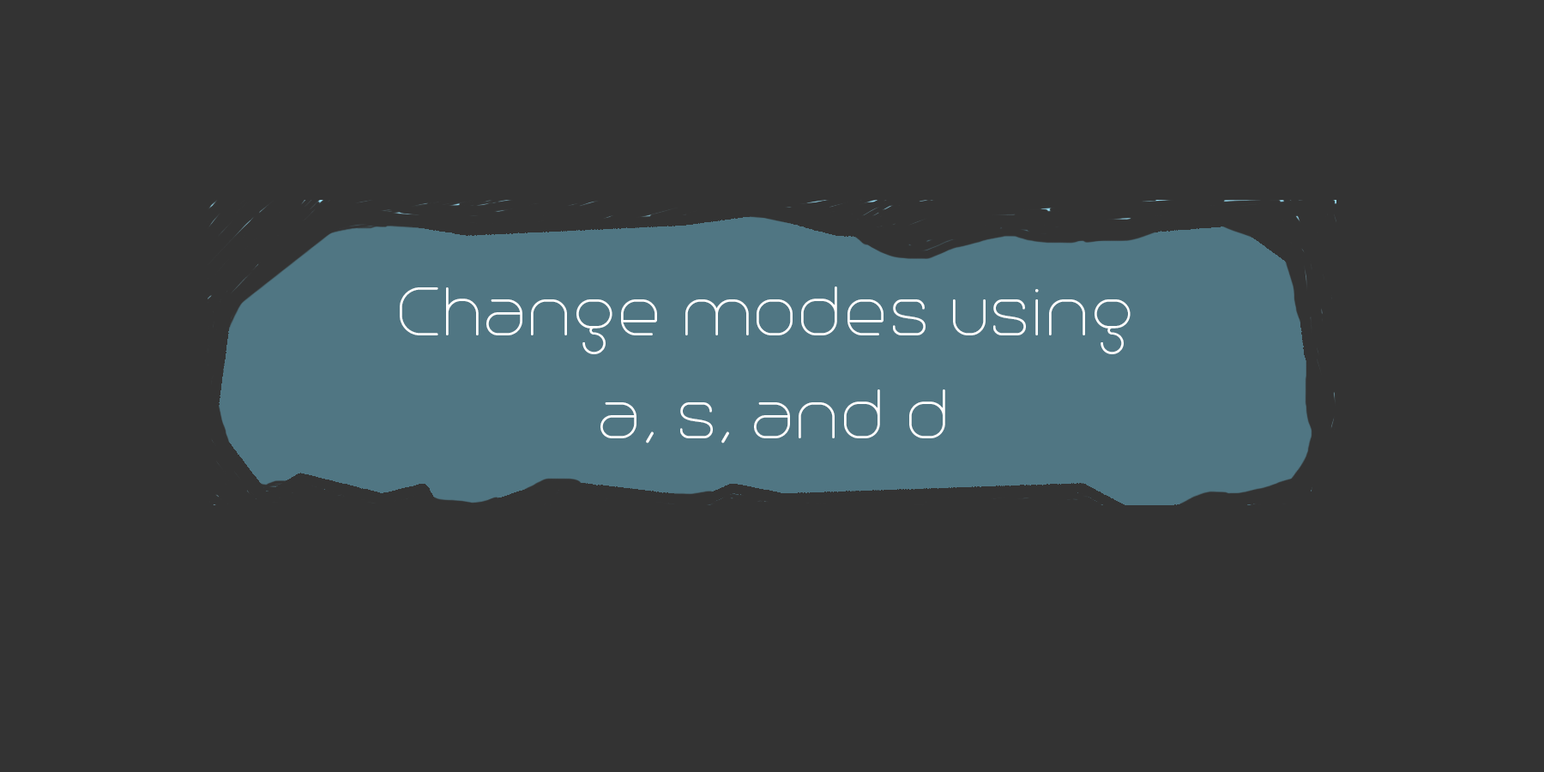
<style>
.page{position:relative;width:1544px;height:772px;background:#333333}
.page>*{position:absolute;margin:0}
.t1{font:85.8px "Trench-Thin";color:#ffffff}
</style>
<div class="page">
<p class="t1" style="left:400px;top:287px;width:731px;height:157px;text-align:center">Change modes using <br>a, s, and d</p>
</div>
